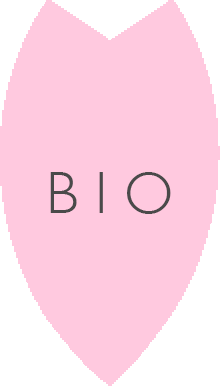
<style>
.page{position:relative;width:220px;height:386px;background:#ffc9df}
.page>*{position:absolute;margin:0}
.t1{font:60px "GillSans-Light";color:#4a4a4a}
</style>
<div class="page">
<p class="t1" style="left:50px;top:172px;width:121px;height:42px">B I O</p>
</div>
